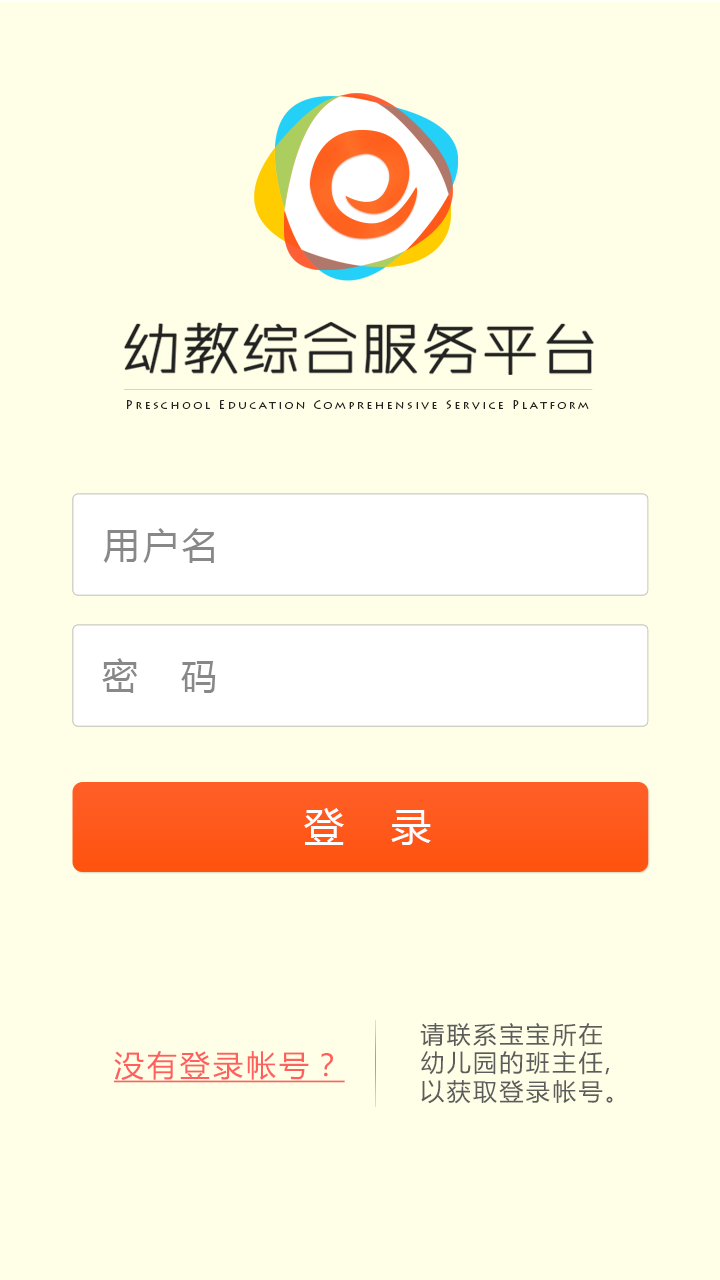
<style>
.page{position:relative;width:720px;height:1280px;background:#fffee6}
.page>*{position:absolute;margin:0}
.t1{font:58.5px "ZHSRXT--GBK1-0";color:#222222;font-weight:bold}
.t2{font:11.7px "LithosPro-Regular";letter-spacing:0.2em;color:#222222}
.t3{font:36px "MicrosoftYaHei";letter-spacing:0.1em;color:#888888}
.t4{font:36px "MicrosoftYaHei";letter-spacing:0.075em;color:#888888}
.t5{font:40px "MicrosoftYaHei";color:#ffffff}
.t6{font:24px "MicrosoftYaHei";letter-spacing:0.1em;color:#5d5c5c}
.t7{font:30px "MicrosoftYaHei";letter-spacing:0.1em;color:#ff605f;text-decoration:underline}
</style>
<div class="page">
<p class="t1" style="left:124px;top:322px;width:470px;height:53px">幼教综合服务平台</p>
<p class="t2" style="left:127px;top:400px;width:462px;height:10px">Preschool Education Comprehensive Service Platform</p>
<p class="t3" style="left:103px;top:528px;width:111px;height:35px">用户名</p>
<p class="t4" style="left:102px;top:658px;width:114px;height:35px">密   码</p>
<p class="t5" style="left:304px;top:808px;width:127px;height:37px">登    录</p>
<p class="t6" style="left:420px;top:1023px;width:193px;height:81px">请联系宝宝所在<br>幼儿园的班主任,<br>以获取登录帐号。</p>
<p class="t7" style="left:114px;top:1051px;width:231px;height:32px">没有登录帐号？</p>
</div>
